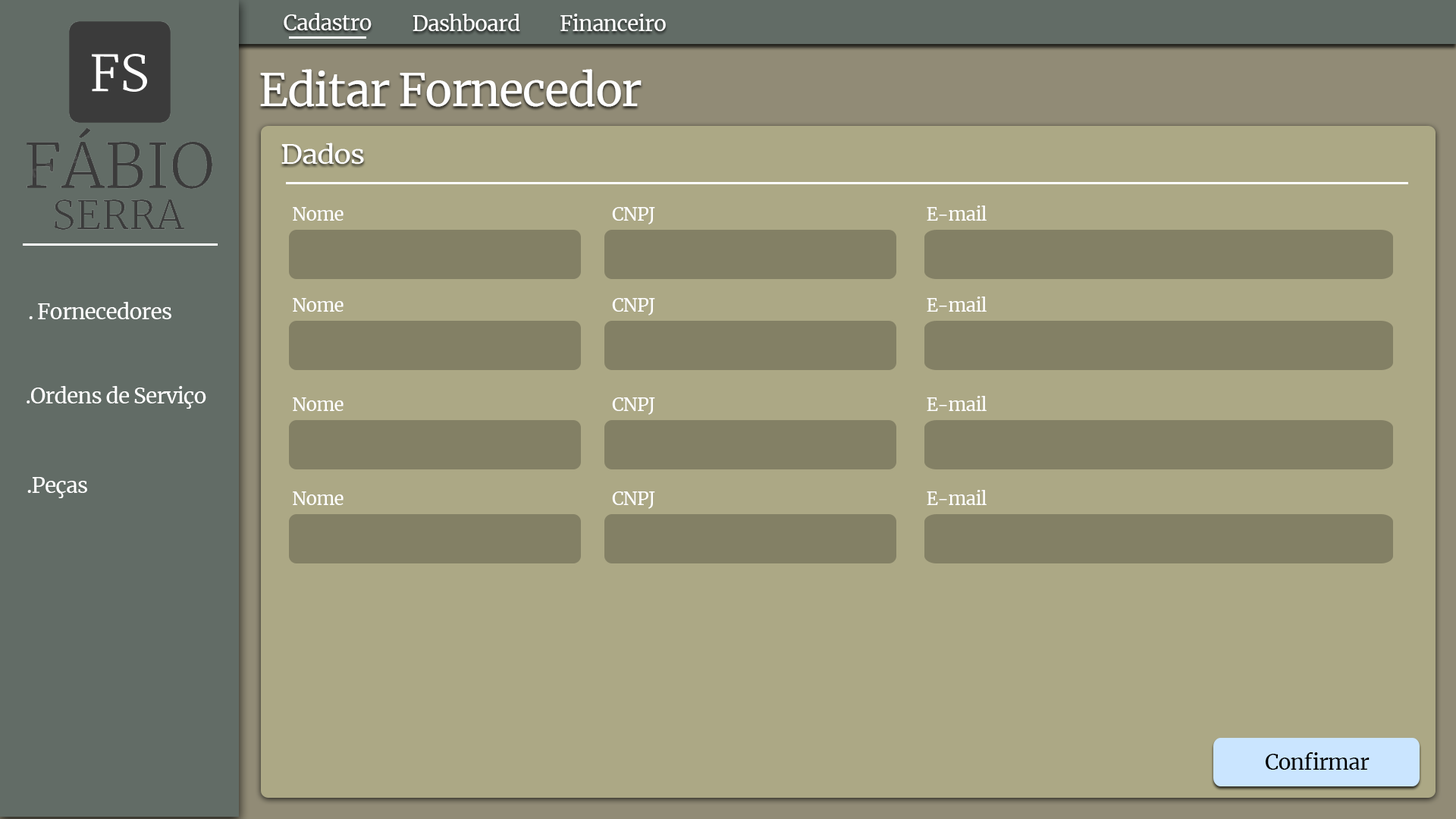
<style>
.page{position:relative;width:1456px;height:819px;background:#aca885}
.page>*{position:absolute;margin:0}
.t1{font:21.2px "Merriweather-Regular";letter-spacing:-0.03em;color:#ffffff}
.t2{font:45.5px "Merriweather-Regular";letter-spacing:-0.03em;color:#ffffff}
.t3{font:25.9px "Merriweather-Regular";letter-spacing:-0.03em;color:#ffffff;scale:1.11 1}
.t4{font:18.2px "Merriweather-Regular";letter-spacing:-0.03em;color:#ffffff}
.t5{font:21.2px "Merriweather-Regular";letter-spacing:-0.03em;color:#000000}
</style>
<div class="page">
<p class="t1" style="left:284px;top:13px;width:88px;height:17px">Cadastro</p>
<p class="t1" style="left:413px;top:14px;width:107px;height:17px">Dashboard</p>
<p class="t1" style="left:560px;top:14px;width:106px;height:17px">Financeiro</p>
<p class="t2" style="left:260px;top:69px;width:382px;height:38px">Editar Fornecedor</p>
<p class="t3" style="left:281px;top:143px;width:83px;height:21px">Dados</p>
<p class="t4" style="left:293px;top:207px;width:51px;height:14px">Nome</p>
<p class="t4" style="left:612px;top:207px;width:43px;height:17px">CNPJ</p>
<p class="t4" style="left:927px;top:206px;width:60px;height:15px">E-mail</p>
<p class="t1" style="left:29px;top:302px;width:142px;height:17px">. Fornecedores</p>
<p class="t4" style="left:293px;top:298px;width:51px;height:14px">Nome</p>
<p class="t4" style="left:612px;top:298px;width:43px;height:17px">CNPJ</p>
<p class="t4" style="left:927px;top:297px;width:60px;height:15px">E-mail</p>
<p class="t1" style="left:27px;top:386px;width:179px;height:23px">.Ordens de Serviço</p>
<p class="t4" style="left:293px;top:397px;width:51px;height:14px">Nome</p>
<p class="t4" style="left:612px;top:397px;width:43px;height:18px">CNPJ</p>
<p class="t4" style="left:927px;top:396px;width:60px;height:15px">E-mail</p>
<p class="t1" style="left:27px;top:477px;width:60px;height:21px">.Peças</p>
<p class="t4" style="left:293px;top:491px;width:51px;height:14px">Nome</p>
<p class="t4" style="left:612px;top:491px;width:43px;height:18px">CNPJ</p>
<p class="t4" style="left:927px;top:490px;width:60px;height:15px">E-mail</p>
<p class="t5" style="left:1265px;top:752px;width:105px;height:18px">Confirmar</p>
</div>
